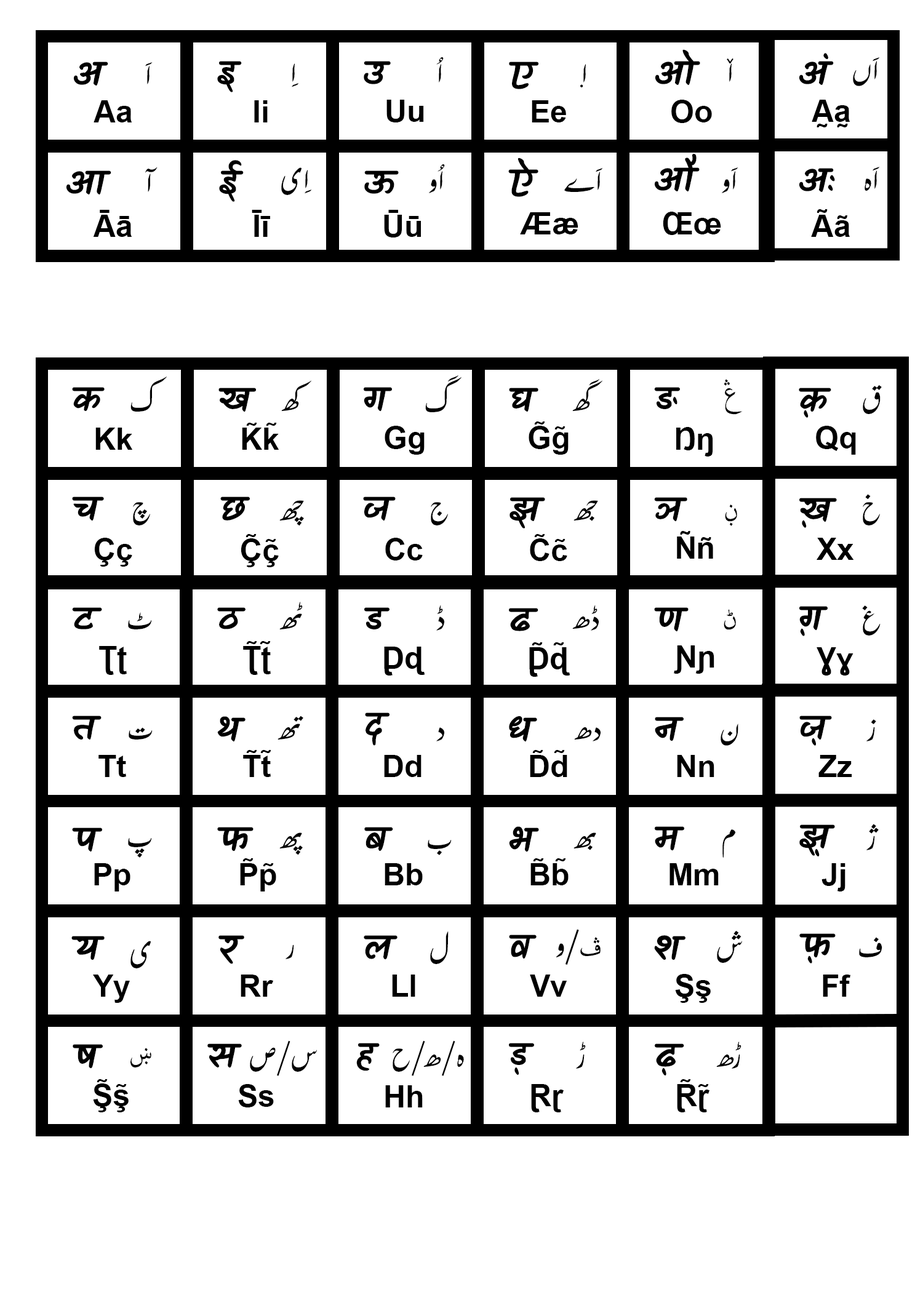
<style>
.page{position:relative;width:923px;height:1292px;background:#ffffff}
.page>*{position:absolute;margin:0}
.t1{font:35.9px "Kalam-Bold";color:#000000}
.t2{font:35.9px "UrduTypesetting";color:#000000}
.t3{font:35.9px "MyriadArabic-Regular";color:#000000}
.t4{font:30.8px "Arial-BoldMT";color:#000000}
.t5{font:35.9px "ArabicTypesetting";color:#000000}
</style>
<div class="page">
<p class="t1" style="left:655px;top:49px;width:45px;height:37px">ओ</p>
<p class="t1" style="left:799px;top:53px;width:35px;height:32px">अं</p>
<p class="t1" style="left:73px;top:62px;width:35px;height:24px">अ</p>
<p class="t2" style="left:145px;top:62px;width:8px;height:22px">اَ</p>
<p class="t1" style="left:217px;top:61px;width:25px;height:31px">इ</p>
<p class="t2" style="left:292px;top:63px;width:7px;height:24px">اِ</p>
<p class="t1" style="left:364px;top:61px;width:27px;height:23px">उ</p>
<p class="t2" style="left:436px;top:57px;width:8px;height:25px">اُ</p>
<p class="t1" style="left:509px;top:62px;width:29px;height:27px">ए</p>
<p class="t2" style="left:580px;top:64px;width:6px;height:23px">ا<span class="t3">ٜ</span></p>
<p class="t2" style="left:727px;top:58px;width:6px;height:24px">ا<span class="t3">ٚ</span></p>
<p class="t2" style="left:853px;top:57px;width:27px;height:29px">اَں</p>
<p class="t4" style="left:94px;top:100px;width:38px;height:22px">Aa</p>
<p class="t4" style="left:254px;top:100px;width:14px;height:22px">Ii</p>
<p class="t4" style="left:386px;top:100px;width:38px;height:22px">Uu</p>
<p class="t4" style="left:532px;top:100px;width:34px;height:22px">Ee</p>
<p class="t4" style="left:671px;top:100px;width:41px;height:23px">Oo</p>
<p class="t4" style="left:812px;top:100px;width:38px;height:27px">A̰a̰</p>
<p class="t1" style="left:219px;top:160px;width:25px;height:42px">ई</p>
<p class="t1" style="left:508px;top:158px;width:30px;height:39px">ऐ</p>
<p class="t1" style="left:654px;top:154px;width:46px;height:38px">औ</p>
<p class="t1" style="left:66px;top:170px;width:45px;height:25px">आ</p>
<p class="t2" style="left:145px;top:167px;width:13px;height:25px">آ</p>
<p class="t2" style="left:281px;top:167px;width:31px;height:28px">اِى</p>
<p class="t1" style="left:364px;top:170px;width:35px;height:24px">ऊ</p>
<p class="t2" style="left:429px;top:164px;width:16px;height:29px">اُو</p>
<p class="t2" style="left:564px;top:168px;width:39px;height:24px">اَے</p>
<p class="t2" style="left:722px;top:167px;width:16px;height:26px">اَو</p>
<p class="t1" style="left:799px;top:168px;width:36px;height:24px">अः</p>
<p class="t2" style="left:864px;top:167px;width:16px;height:24px">اَه</p>
<p class="t4" style="left:93px;top:210px;width:39px;height:27px">Āā</p>
<p class="t4" style="left:252px;top:210px;width:18px;height:27px">Īī</p>
<p class="t4" style="left:384px;top:210px;width:37px;height:27px">Ūū</p>
<p class="t4" style="left:811px;top:209px;width:39px;height:28px">Ãã</p>
<p class="t4" style="left:520px;top:212px;width:58px;height:22px">Ææ</p>
<p class="t4" style="left:663px;top:212px;width:58px;height:23px">Œœ</p>
<p class="t2" style="left:130px;top:376px;width:37px;height:36px">ک</p>
<p class="t2" style="left:425px;top:375px;width:36px;height:37px">گ</p>
<p class="t1" style="left:72px;top:387px;width:33px;height:24px">क</p>
<p class="t1" style="left:218px;top:388px;width:38px;height:24px">ख</p>
<p class="t2" style="left:281px;top:380px;width:30px;height:31px">کھ</p>
<p class="t1" style="left:364px;top:387px;width:28px;height:25px">ग</p>
<p class="t1" style="left:509px;top:388px;width:29px;height:24px">घ</p>
<p class="t2" style="left:572px;top:379px;width:30px;height:32px">گھ</p>
<p class="t1" style="left:654px;top:387px;width:26px;height:22px">ङ</p>
<p class="t5" style="left:724px;top:379px;width:18px;height:36px">ڠ</p>
<p class="t1" style="left:799px;top:388px;width:32px;height:30px">क़</p>
<p class="t2" style="left:863px;top:385px;width:19px;height:29px">ق</p>
<p class="t4" style="left:242px;top:423px;width:37px;height:27px">K̃k̃</p>
<p class="t4" style="left:385px;top:426px;width:40px;height:29px">Gg</p>
<p class="t4" style="left:529px;top:421px;width:40px;height:34px">G̃g̃</p>
<p class="t4" style="left:816px;top:426px;width:40px;height:29px">Qq</p>
<p class="t4" style="left:95px;top:428px;width:38px;height:22px">Kk</p>
<p class="t4" style="left:676px;top:427px;width:37px;height:30px">Ŋŋ</p>
<p class="t1" style="left:72px;top:497px;width:32px;height:24px">च</p>
<p class="t1" style="left:220px;top:497px;width:30px;height:24px">छ</p>
<p class="t1" style="left:363px;top:497px;width:33px;height:24px">ज</p>
<p class="t1" style="left:509px;top:497px;width:36px;height:32px">झ</p>
<p class="t1" style="left:654px;top:497px;width:33px;height:25px">ञ</p>
<p class="t1" style="left:799px;top:498px;width:38px;height:30px">ख़</p>
<p class="t2" style="left:863px;top:494px;width:17px;height:31px">خ</p>
<p class="t2" style="left:133px;top:502px;width:17px;height:23px">چ</p>
<p class="t2" style="left:279px;top:500px;width:25px;height:26px">چھ</p>
<p class="t2" style="left:431px;top:502px;width:17px;height:23px">ج</p>
<p class="t2" style="left:573px;top:500px;width:25px;height:21px">جھ</p>
<p class="t5" style="left:725px;top:505px;width:12px;height:21px">ڹ</p>
<p class="t4" style="left:677px;top:531px;width:36px;height:28px">Ññ</p>
<p class="t4" style="left:94px;top:538px;width:38px;height:29px">Çç</p>
<p class="t4" style="left:241px;top:534px;width:38px;height:33px">Ç̃ç̃</p>
<p class="t4" style="left:385px;top:538px;width:38px;height:23px">Cc</p>
<p class="t4" style="left:530px;top:534px;width:37px;height:27px">C̃c̃</p>
<p class="t4" style="left:816px;top:538px;width:38px;height:22px">Xx</p>
<p class="t2" style="left:279px;top:602px;width:24px;height:27px">ٹھ</p>
<p class="t2" style="left:436px;top:605px;width:8px;height:26px">ڈ</p>
<p class="t2" style="left:572px;top:605px;width:27px;height:26px">ڈھ</p>
<p class="t2" style="left:862px;top:605px;width:18px;height:31px">غ</p>
<p class="t1" style="left:72px;top:607px;width:30px;height:22px">ट</p>
<p class="t2" style="left:128px;top:612px;width:24px;height:17px">ٹ</p>
<p class="t1" style="left:217px;top:607px;width:28px;height:22px">ठ</p>
<p class="t1" style="left:364px;top:607px;width:25px;height:22px">ड</p>
<p class="t1" style="left:509px;top:608px;width:29px;height:23px">ढ</p>
<p class="t1" style="left:654px;top:607px;width:34px;height:25px">ण</p>
<p class="t5" style="left:724px;top:609px;width:12px;height:21px">ڻ</p>
<p class="t1" style="left:799px;top:606px;width:29px;height:30px">ग़</p>
<p class="t4" style="left:243px;top:641px;width:28px;height:34px">Ʈ̃ʈ̃</p>
<p class="t4" style="left:99px;top:646px;width:28px;height:29px">Ʈʈ</p>
<p class="t4" style="left:674px;top:645px;width:40px;height:29px">Ɲɲ</p>
<p class="t4" style="left:816px;top:647px;width:37px;height:29px">Ɣɣ</p>
<p class="t1" style="left:365px;top:712px;width:24px;height:34px">द</p>
<p class="t1" style="left:72px;top:716px;width:30px;height:24px">त</p>
<p class="t1" style="left:217px;top:716px;width:28px;height:26px">थ</p>
<p class="t2" style="left:277px;top:716px;width:26px;height:24px">تھ</p>
<p class="t1" style="left:509px;top:716px;width:28px;height:26px">ध</p>
<p class="t1" style="left:655px;top:717px;width:29px;height:24px">न</p>
<p class="t2" style="left:720px;top:724px;width:18px;height:22px">ن</p>
<p class="t1" style="left:799px;top:716px;width:33px;height:30px">ज़</p>
<p class="t2" style="left:866px;top:719px;width:10px;height:22px">ز</p>
<p class="t2" style="left:129px;top:727px;width:24px;height:13px">ت</p>
<p class="t2" style="left:436px;top:727px;width:8px;height:14px">د</p>
<p class="t2" style="left:574px;top:727px;width:26px;height:14px">دھ</p>
<p class="t4" style="left:98px;top:755px;width:28px;height:22px">Tt</p>
<p class="t4" style="left:243px;top:750px;width:28px;height:27px">T̃t̃</p>
<p class="t4" style="left:384px;top:755px;width:37px;height:22px">Dd</p>
<p class="t4" style="left:530px;top:750px;width:37px;height:27px">D̃d̃</p>
<p class="t4" style="left:677px;top:755px;width:37px;height:22px">Nn</p>
<p class="t4" style="left:818px;top:755px;width:34px;height:22px">Zz</p>
<p class="t1" style="left:72px;top:828px;width:30px;height:24px">प</p>
<p class="t1" style="left:217px;top:827px;width:36px;height:25px">फ</p>
<p class="t2" style="left:279px;top:832px;width:24px;height:23px">پھ</p>
<p class="t1" style="left:364px;top:827px;width:29px;height:24px">ब</p>
<p class="t1" style="left:509px;top:826px;width:30px;height:26px">भ</p>
<p class="t2" style="left:573px;top:832px;width:23px;height:18px">بھ</p>
<p class="t1" style="left:655px;top:826px;width:29px;height:25px">म</p>
<p class="t2" style="left:722px;top:829px;width:13px;height:29px">م</p>
<p class="t1" style="left:799px;top:824px;width:36px;height:32px">झ़</p>
<p class="t2" style="left:866px;top:824px;width:13px;height:26px">ژ</p>
<p class="t2" style="left:128px;top:838px;width:24px;height:20px">پ</p>
<p class="t2" style="left:428px;top:840px;width:24px;height:15px">ب</p>
<p class="t4" style="left:94px;top:863px;width:36px;height:29px">Pp</p>
<p class="t4" style="left:240px;top:858px;width:36px;height:34px">P̃p̃</p>
<p class="t4" style="left:385px;top:863px;width:38px;height:22px">Bb</p>
<p class="t4" style="left:530px;top:858px;width:39px;height:27px">B̃b̃</p>
<p class="t4" style="left:669px;top:863px;width:50px;height:22px">Mm</p>
<p class="t4" style="left:821px;top:863px;width:24px;height:29px">Jj</p>
<p class="t2" style="left:556px;top:929px;width:44px;height:36px"><span class="t5">ڤ</span>/و</p>
<p class="t1" style="left:71px;top:936px;width:34px;height:24px">य</p>
<p class="t2" style="left:130px;top:941px;width:21px;height:27px">ی</p>
<p class="t1" style="left:218px;top:935px;width:26px;height:29px">र</p>
<p class="t1" style="left:364px;top:935px;width:33px;height:25px">ल</p>
<p class="t2" style="left:430px;top:931px;width:19px;height:33px">ل</p>
<p class="t1" style="left:509px;top:935px;width:28px;height:24px">व</p>
<p class="t1" style="left:654px;top:935px;width:31px;height:25px">श</p>
<p class="t2" style="left:717px;top:931px;width:25px;height:32px">ش</p>
<p class="t1" style="left:799px;top:933px;width:37px;height:31px">फ़</p>
<p class="t2" style="left:859px;top:937px;width:23px;height:20px">ف</p>
<p class="t2" style="left:285px;top:944px;width:9px;height:15px">ر</p>
<p class="t4" style="left:93px;top:975px;width:37px;height:28px">Yy</p>
<p class="t4" style="left:241px;top:975px;width:32px;height:22px">Rr</p>
<p class="t4" style="left:392px;top:975px;width:23px;height:22px">Ll</p>
<p class="t4" style="left:530px;top:975px;width:37px;height:22px">Vv</p>
<p class="t4" style="left:675px;top:974px;width:36px;height:29px">Şş</p>
<p class="t4" style="left:823px;top:975px;width:27px;height:22px">Ff</p>
<p class="t1" style="left:73px;top:1044px;width:30px;height:25px">ष</p>
<p class="t5" style="left:130px;top:1048px;width:21px;height:19px">ښ</p>
<p class="t1" style="left:207px;top:1043px;width:35px;height:25px">स</p>
<p class="t2" style="left:250px;top:1040px;width:67px;height:36px">س/ص</p>
<p class="t1" style="left:356px;top:1043px;width:24px;height:28px">ह</p>
<p class="t2" style="left:393px;top:1040px;width:71px;height:36px">ہ/ھ/ح</p>
<p class="t1" style="left:509px;top:1043px;width:25px;height:32px">ड़</p>
<p class="t2" style="left:576px;top:1042px;width:10px;height:27px">ڑ</p>
<p class="t1" style="left:655px;top:1043px;width:29px;height:32px">ढ़</p>
<p class="t2" style="left:716px;top:1042px;width:25px;height:27px">ڑھ</p>
<p class="t4" style="left:93px;top:1079px;width:36px;height:33px">Ş̃ş̃</p>
<p class="t4" style="left:238px;top:1084px;width:36px;height:23px">Ss</p>
<p class="t4" style="left:385px;top:1085px;width:38px;height:22px">Hh</p>
<p class="t4" style="left:531px;top:1084px;width:33px;height:28px">Ɽɽ</p>
<p class="t4" style="left:677px;top:1079px;width:32px;height:33px">Ɽ̃ɽ̃</p>
</div>
